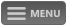
<style>
.page{position:relative;width:67px;height:26px}
.page>*{position:absolute;margin:0}
.t1{font:10px "SegoeUI-Bold";color:#cccccc}
</style>
<div class="page">
<p class="t1" style="left:30px;top:9px;width:30px;height:9px">MENU</p>
</div>
